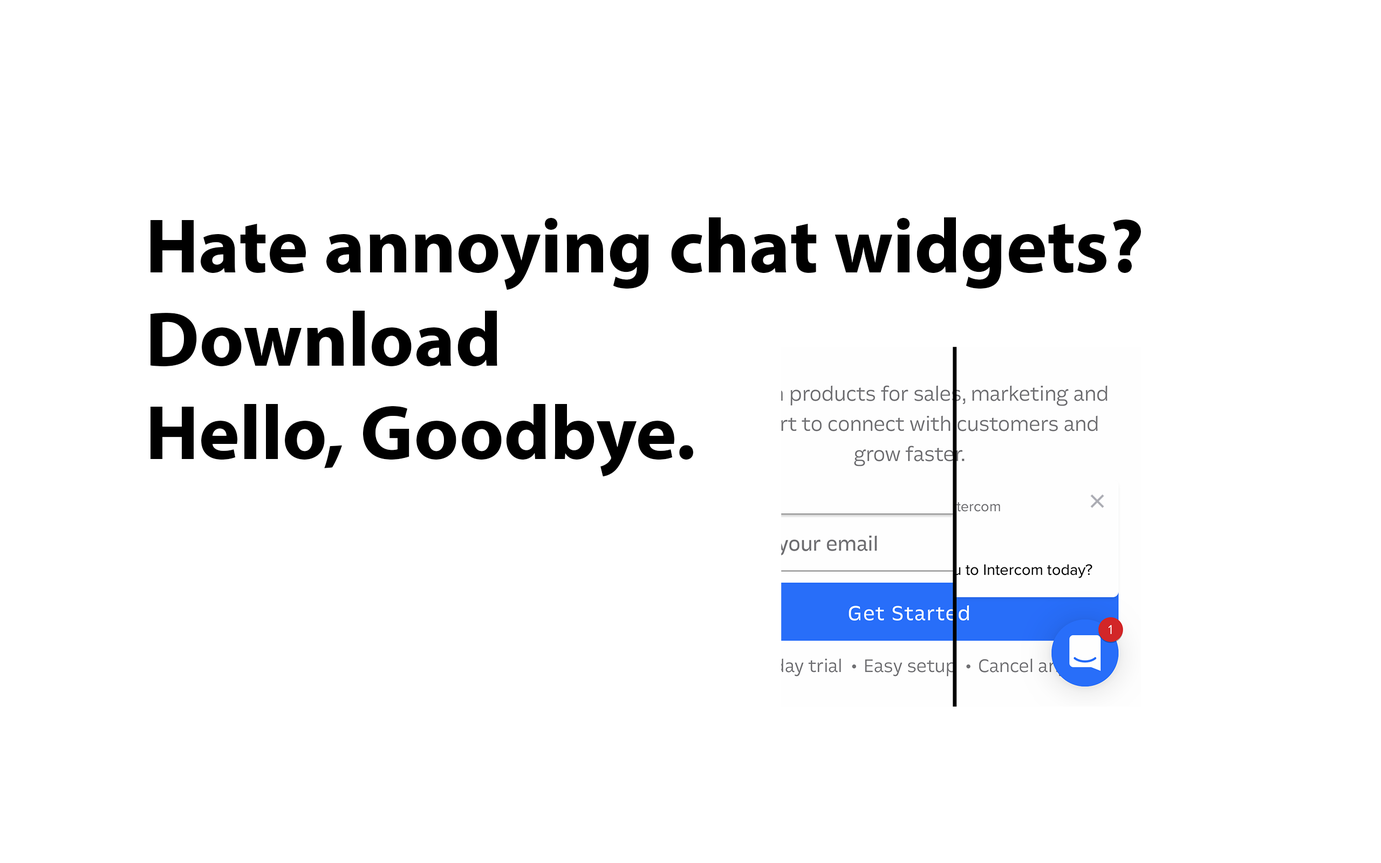
<style>
.page{position:relative;width:1381px;height:863px;background:#ffffff}
.page>*{position:absolute;margin:0}
.t1{font:77.7px "MyriadPro-Bold";color:#000000}
</style>
<div class="page">
<p class="t1" style="left:151px;top:217px;width:990px;height:260px">Hate annoying chat widgets?<br>Download <br>Hello, Goodbye.</p>
</div>
